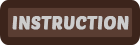
<style>
.page{position:relative;width:140px;height:45px;background:#5a3d32}
.page>*{position:absolute;margin:0}
.t1{font:18px "PoetsenOne-Regular";color:#cccccc;font-weight:bold}
</style>
<div class="page">
<p class="t1" style="left:12px;top:16px;width:117px;height:14px">INSTRUCTION</p>
</div>
